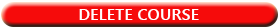
<style>
.page{position:relative;width:280px;height:28px;background:#f60b0b}
.page>*{position:absolute;margin:0}
.t1{font:16.4px "YuGothicUI-Bold";color:#ffffff}
</style>
<div class="page">
<p class="t1" style="left:79px;top:9px;width:120px;height:11px">DELETE COURSE</p>
</div>
